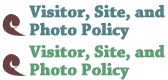
<style>
.page{position:relative;width:168px;height:80px;background:#ffffff}
.page>*{position:absolute;margin:0}
.t1{font:17.5px/18px "ChaparralPro-Bold";letter-spacing:-0.025em;color:#50828b;font-weight:bold}
.t2{font:17.5px/18px "ChaparralPro-Bold";letter-spacing:-0.025em;color:#59a172;font-weight:bold}
</style>
<div class="page">
<p class="t1" style="left:29px;top:4px;width:136px;height:36px">Visitor, Site, and<br>Photo Policy</p>
<p class="t2" style="left:29px;top:44px;width:136px;height:36px">Visitor, Site, and<br>Photo Policy</p>
</div>
